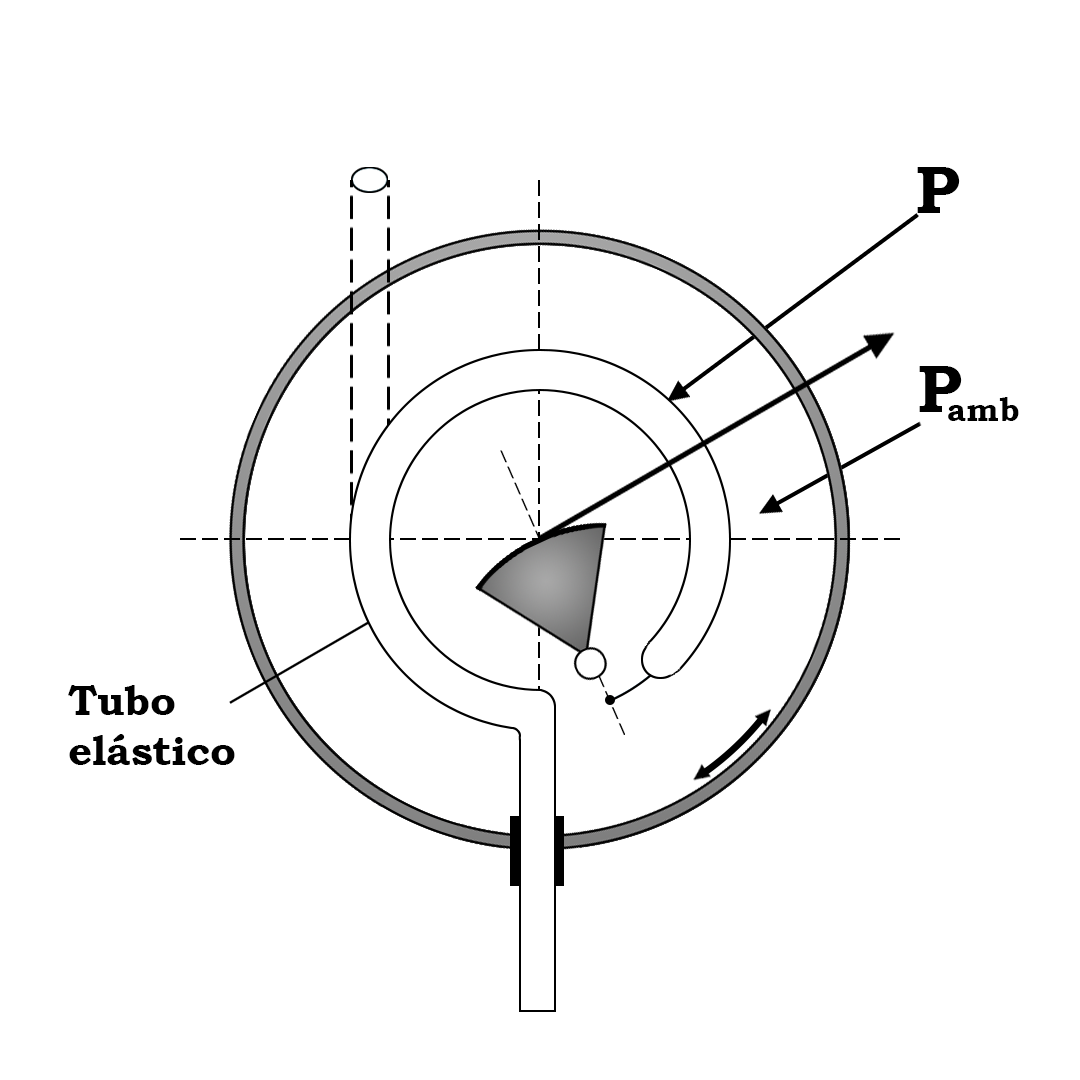
<style>
.page{position:relative;width:1080px;height:1080px;background:#ffffff}
.page>*{position:absolute;margin:0}
.t1{font:66.7px "BookmanOldStyle-Bold";color:#000000}
.t2{font:33.3px "BookmanOldStyle-Bold";color:#000000}
.t3{font:41.7px "BookmanOldStyle-Bold";color:#000000}
</style>
<div class="page">
<p class="t1" style="left:917px;top:167px;width:43px;height:46px">P</p>
<p class="t1" style="left:919px;top:366px;width:43px;height:46px">P</p>
<p class="t2" style="left:948px;top:397px;width:71px;height:24px">amb</p>
<p class="t3" style="left:68px;top:685px;width:167px;height:80px">Tubo<br>elástico</p>
</div>
